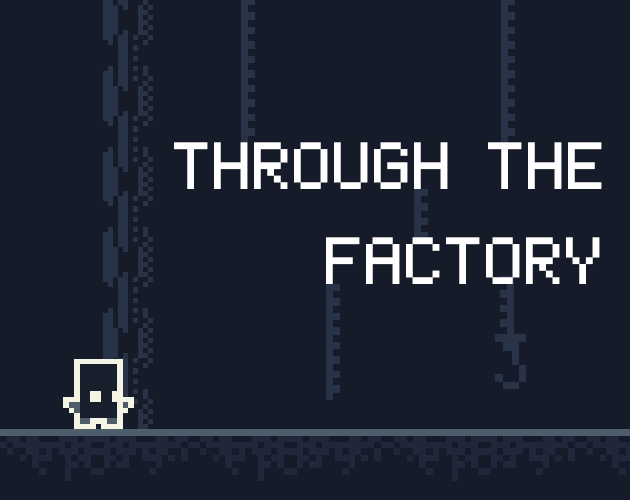
<style>
.page{position:relative;width:630px;height:500px;background:#151b29}
.page>*{position:absolute;margin:0}
.t1{font:104.2px "AtlantisInternational";color:#ffffff}
</style>
<div class="page">
<p class="t1" style="left:174px;top:142px;width:428px;height:47px">THROUGH THE</p>
<p class="t1" style="left:326px;top:237px;width:274px;height:47px">FACTORY</p>
</div>
